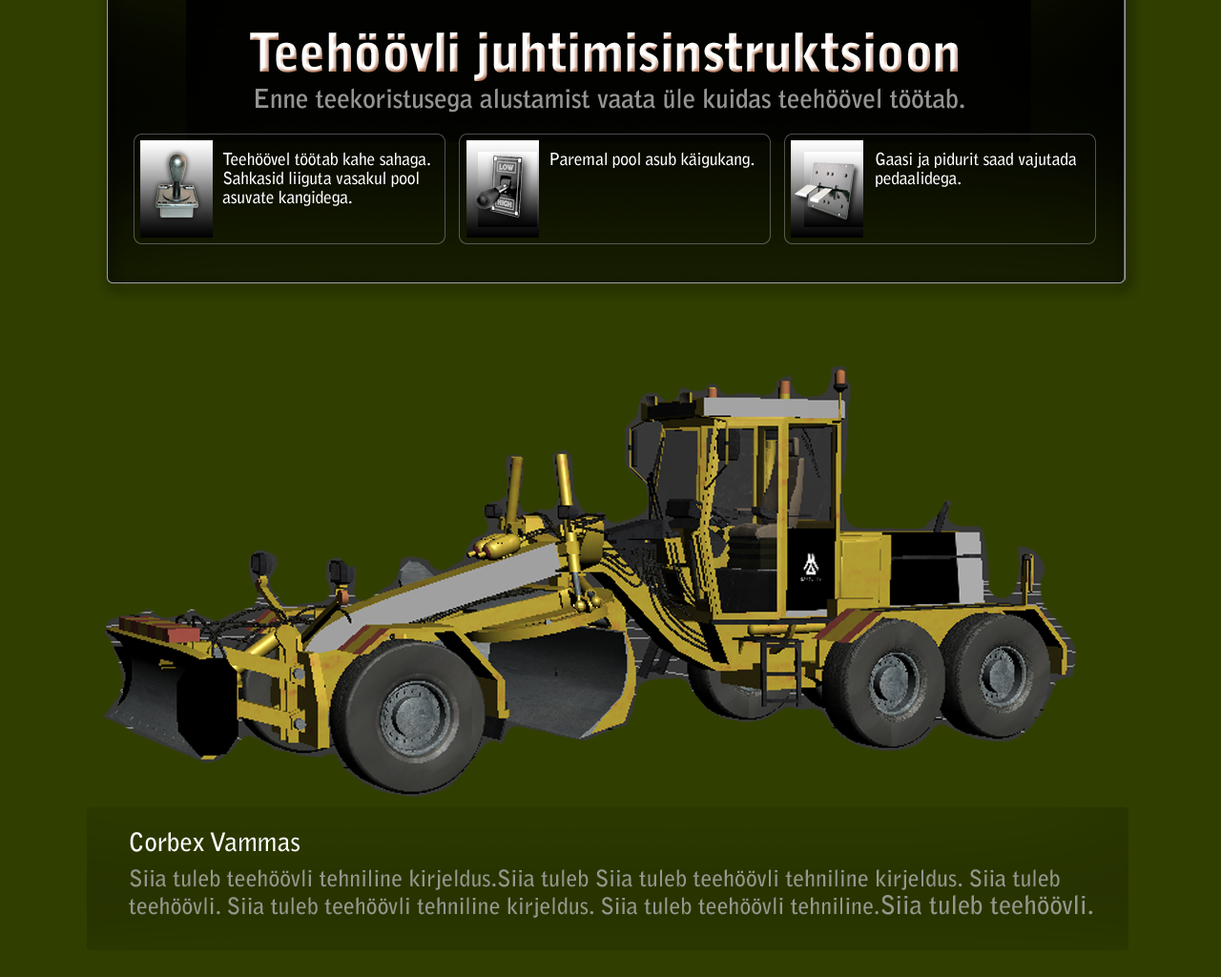
<style>
.page{position:relative;width:1221px;height:977px;background:#303e00}
.page>*{position:absolute;margin:0}
.t1{font:52.9px "BellGothicStd-Black";letter-spacing:-0.02em}
.t2{font:25.7px "BellGothicStd-Bold";color:#949593}
.t3{font:17px/19px "BellGothicStd-Bold";letter-spacing:-0.02em;color:#ffffff}
.t4{font:17px "BellGothicStd-Bold";letter-spacing:-0.02em;color:#ffffff}
.t5{font:22.6px/27.3px "BellGothicStd-Bold";color:#94978c}
.t6{font:25.5px/27.3px "BellGothicStd-Bold";color:#ffffff}
.t7{font:22.6px/35.6px "BellGothicStd-Bold";color:#94978c}
.t8{font:25.5px/27.3px "BellGothicStd-Bold";color:#94978c}
</style>
<div class="page">
<p class="t1" style="left:250px;top:31px;width:708px;height:50px">Teehöövli juhtimisinstruktsioon</p>
<p class="t2" style="left:256px;top:88px;width:708px;height:25px">Enne teekoristusega alustamist vaata üle kuidas teehöövel töötab.</p>
<p class="t3" style="left:222px;top:152px;width:208px;height:54px;text-align:justify">Teehöövel töötab kahe sahaga. <br>Sahkasid liiguta vasakul pool <br>asuvate kangidega.</p>
<p class="t4" style="left:550px;top:152px;width:204px;height:16px">Paremal pool asub käigukang.</p>
<p class="t3" style="left:876px;top:152px;width:200px;height:35px;text-align:justify">Gaasi ja pidurit saad vajutada <br>pedaalidega.</p>
<p class="t5" style="left:129px;top:832px;width:964px;height:86px;text-align:justify"><span class="t6">Corbex Vammas<br></span><span class="t7">Siia tuleb teehöövli tehniline kirjeldus.Siia tuleb Siia tuleb teehöövli tehniline kirjeldus. </span>Siia tuleb <br>teehöövli. Siia tuleb teehöövli tehniline kirjeldus. Siia tuleb teehöövli tehniline.<span class="t8">Siia tuleb teehöövli.</span></p>
</div>
